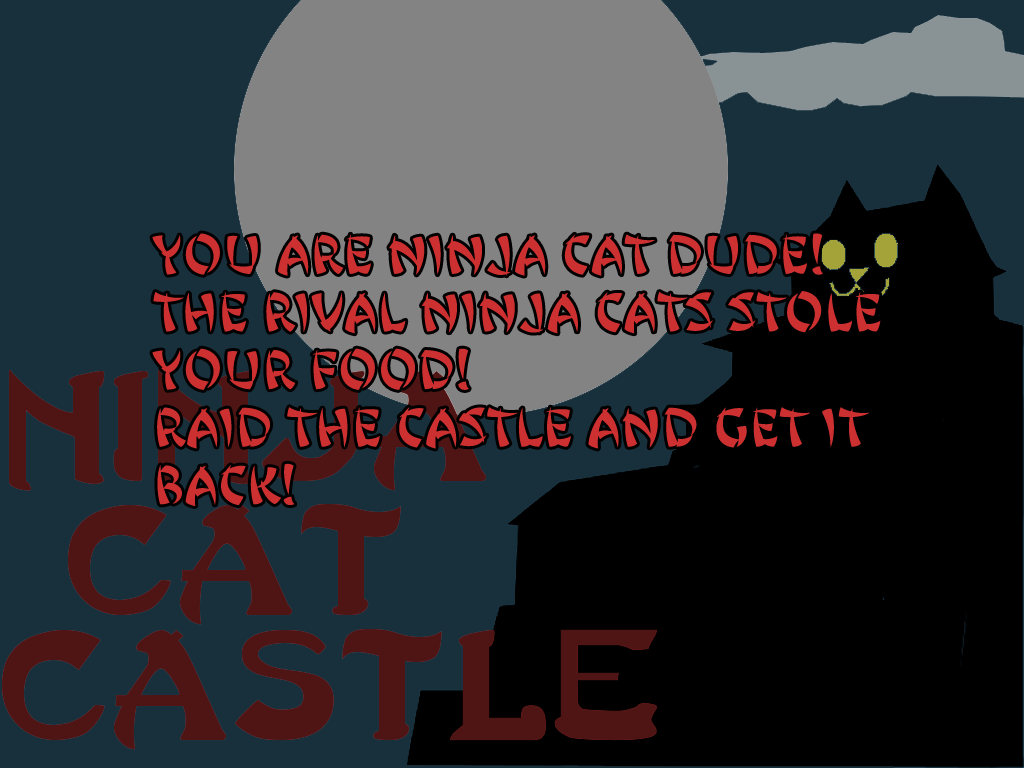
<style>
.page{position:relative;width:1024px;height:768px;background:#18303c}
.page>*{position:absolute;margin:0}
.t1{font:48px "JingJing";color:#cd3030}
</style>
<div class="page">
<p class="t1" style="left:152px;top:233px;width:729px;height:273px">YOU ARE NINJA CAT DUDE!<br>THE RIVAL NINJA CATS STOLE YOUR FOOD!<br>RAID THE CASTLE AND GET IT BACK!</p>
</div>
